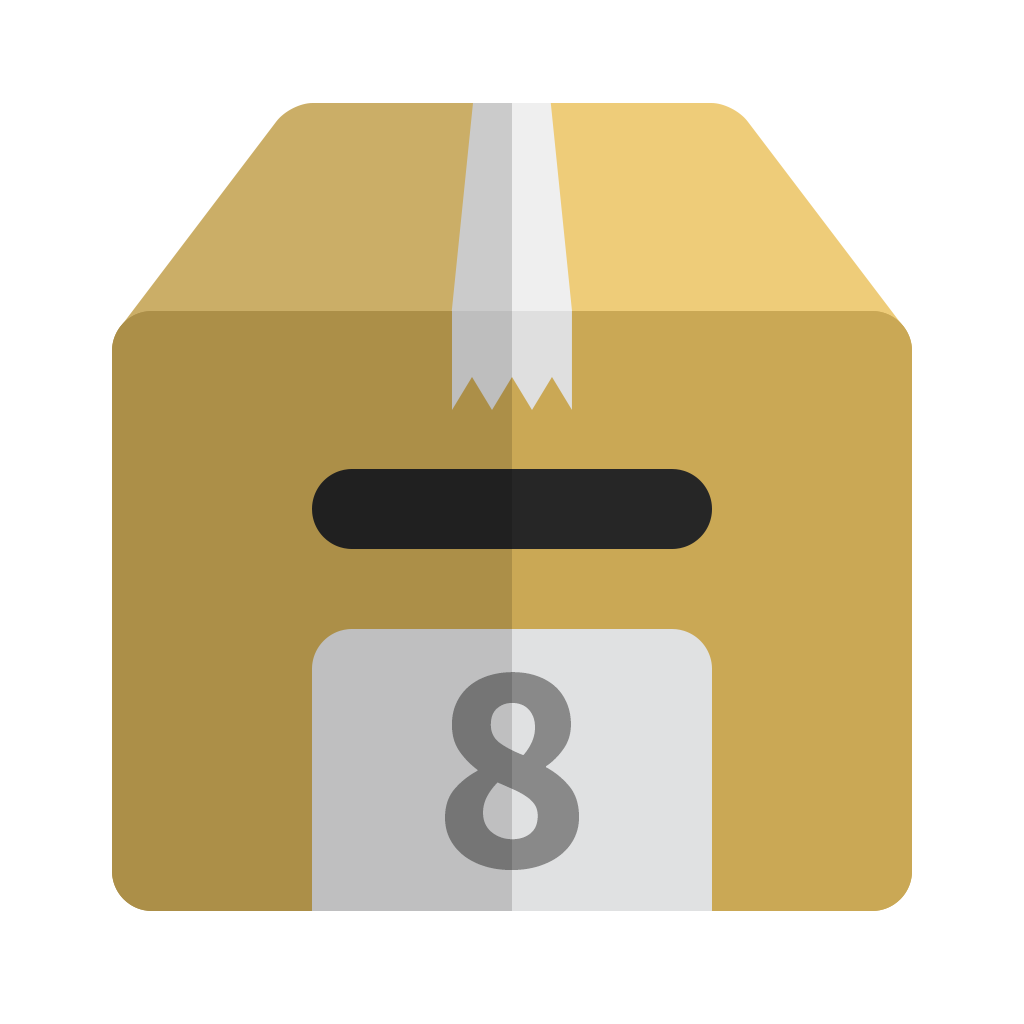
<style>
.page{position:relative;width:1024px;height:1024px;background:#ffffff}
.page>*{position:absolute;margin:0}
.t1{font:300px "SourceSansPro-Bold";color:#898989}
</style>
<div class="page">
<p class="t1" style="left:445px;top:672px;width:134px;height:198px">8</p>
</div>
